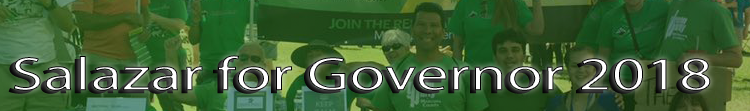
<style>
.page{position:relative;width:750px;height:111px}
.page>*{position:absolute;margin:0}
.t1{font:48px "MyriadPro-Regular";scale:1.37 1}
</style>
<div class="page">
<p class="t1" style="left:13px;top:55px;width:698px;height:36px">Salazar for Governor 2018</p>
</div>
